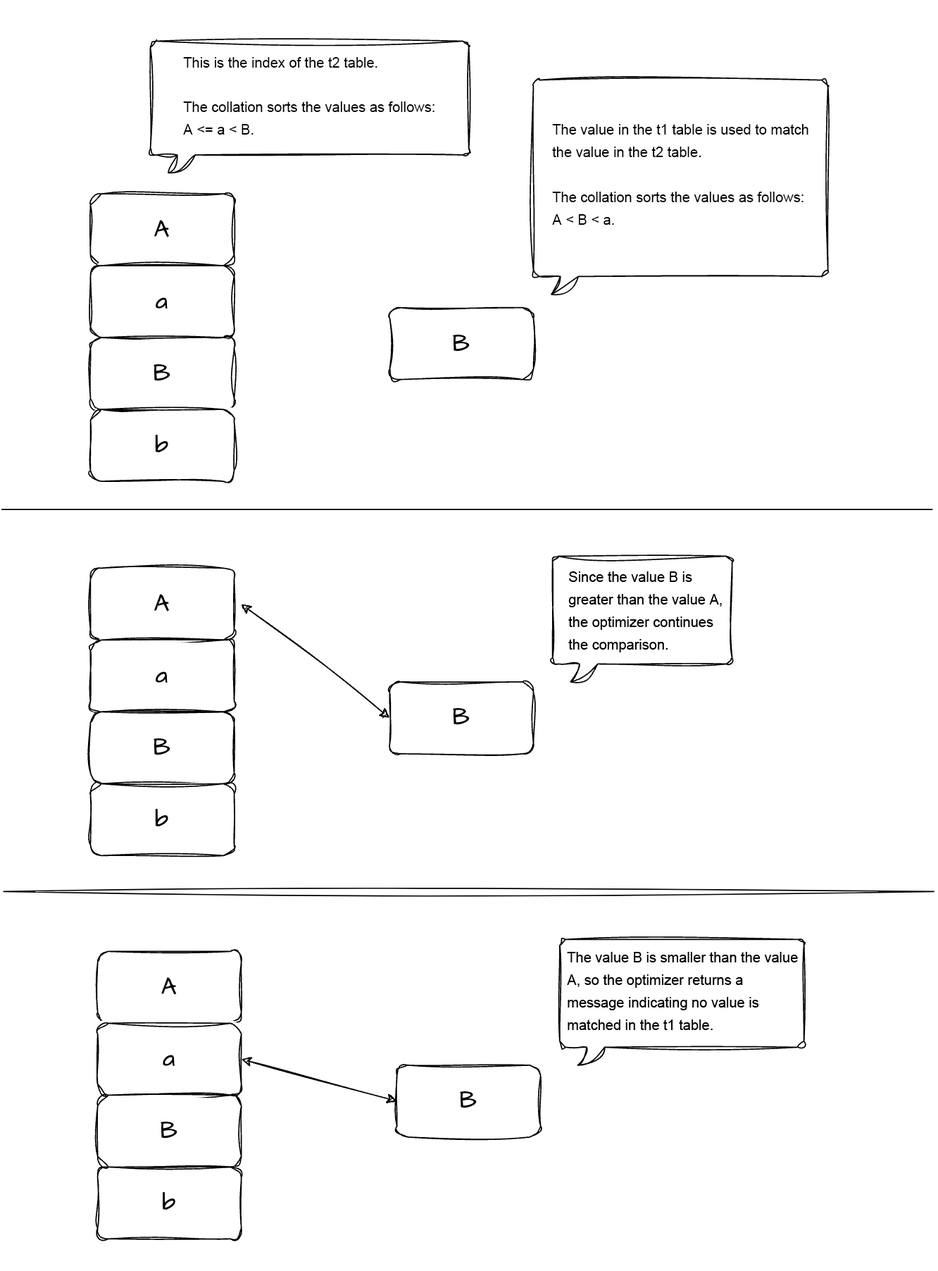
<style>
.page{position:relative;width:938px;height:1271px;background:#ffffff}
.page>*{position:absolute;margin:0}
.t1{font:14.1px/22.5px "ArialMT";color:#000000}
.t2{font:14.1px/44.4px "ArialMT";color:#000000}
</style>
<div class="page">
<p class="t1" style="left:183px;top:57px;width:252px;height:78px"><span class="t2">This is the index of the t2 table.<br></span>The collation sorts the values as follows: A &lt;= a &lt; B.</p>
<p class="t1" style="left:552px;top:124px;width:257px;height:101px">The value in the t1 table is used to match the value in the t2 table.<br><br>The collation sorts the values as follows: A &lt; B &lt; a.</p>
<p class="t1" style="left:568px;top:571px;width:154px;height:81px">Since the value B is greater than the value A, the optimizer continues the comparison.</p>
<p class="t1" style="left:567px;top:952px;width:231px;height:78px">The value B is smaller than the value A, so the optimizer returns a message indicating no value is matched in the t1 table.</p>
</div>
